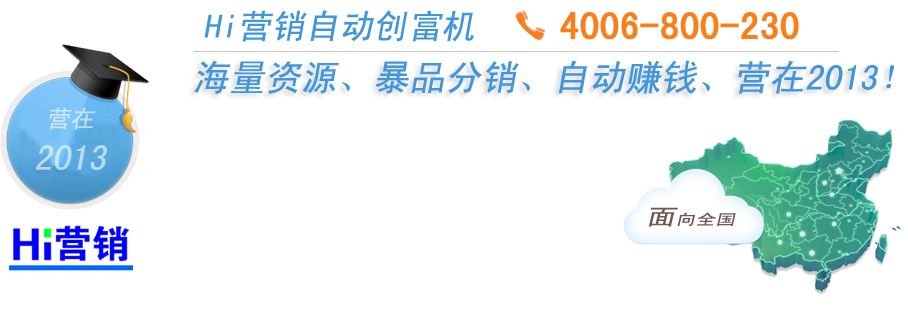
<style>
.page{position:relative;width:908px;height:309px;background:#ffffff}
.page>*{position:absolute;margin:0}
.t1{font:34px "SimHei";color:#4297db;font-style:italic}
.t2{font:38px "SimHei";color:#fb7f19;font-weight:bold}
.t3{font:36px "SimHei";color:#4297db;font-style:italic}
.t4{font:36px "SimHei";color:#bfe0f5;font-style:italic}
.t5{font:24px "SimHei";color:#bfe0f5;font-style:italic}
.t6{font:14.8px "SimHei";color:#745555;font-style:italic;scale:1.34 1}
.t7{font:22.2px "SimHei";color:#745555;font-style:italic;scale:1.34 1}
</style>
<div class="page">
<p class="t1" style="left:204px;top:10px;width:270px;height:32px">Hi营销自动创富机</p>
<p class="t2" style="left:560px;top:12px;width:239px;height:28px">4006-800-230</p>
<p class="t3" style="left:194px;top:60px;width:700px;height:34px">海量资源、暴品分销、自动赚钱、营在2013！</p>
<p class="t4" style="left:35px;top:107px;width:72px;height:63px;text-align:center"><span class="t5">营在<br></span>2013</p>
<p class="t6" style="left:648px;top:207px;width:88px;height:20px"><span class="t7">面</span>向全国</p>
</div>
